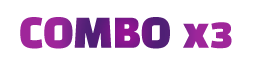
<style>
.page{position:relative;width:256px;height:64px;background:#ffffff}
.page>*{position:absolute;margin:0}
.t1{font:40px "BlackHanSans-Regular"}
</style>
<div class="page">
<p class="t1" style="left:20px;top:17px;width:212px;height:32px">COMBO x3</p>
</div>
